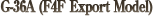
<style>
.page{position:relative;width:154px;height:19px;background:#ffffff}
.page>*{position:absolute;margin:0}
.t1{font:16px "RyuminPro-ExBold";letter-spacing:-0.08em;color:#4a3f32;font-weight:bold;scale:0.84 1}
</style>
<div class="page">
<p class="t1" style="left:0px;top:0px;width:153px;height:16px">G-36A (F4F Export Model)</p>
</div>
